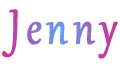
<style>
.page{position:relative;width:120px;height:70px;background:#ffffff}
.page>*{position:absolute;margin:0}
.t1{font:60px "Gabriola";letter-spacing:0.1em;font-weight:bold;scale:0.8 1}
</style>
<div class="page">
<p class="t1" style="left:2px;top:9px;width:116px;height:50px">Jenny</p>
</div>
